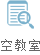
<style>
.page{position:relative;width:40px;height:55px;background:#ffffff}
.page>*{position:absolute;margin:0}
.t1{font:22.5px "SimSun";letter-spacing:0.075em;color:#666666;font-variant:small-caps}
</style>
<div class="page">
<p class="t1" style="left:1px;top:39px;width:39px;height:12px">空教室</p>
</div>
